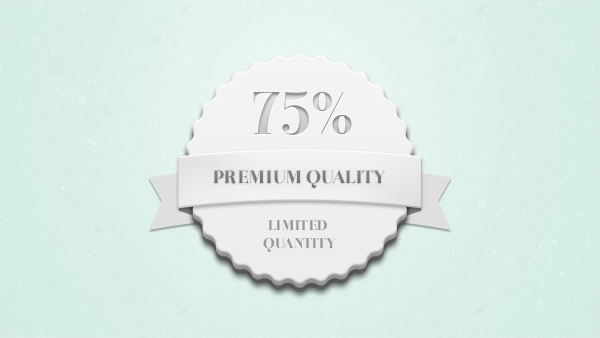
<style>
.page{position:relative;width:600px;height:338px}
.page>*{position:absolute;margin:0}
.t1{font:60px "Otama-ep"}
.t2{font:18px "Otama-ep";color:#787878}
.t3{font:14px/17.7px "Otama-ep";color:#999999}
</style>
<div class="page">
<p class="t1" style="left:253px;top:91px;width:99px;height:44px">75%</p>
<p class="t2" style="left:213px;top:170px;width:173px;height:18px">PREMIUM QUALITY</p>
<p class="t3" style="left:263px;top:220px;width:73px;height:32px;text-align:center">LIMITED <br>QUANTITY</p>
</div>
